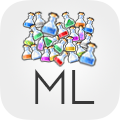
<style>
.page{position:relative;width:120px;height:120px;background:#ededed}
.page>*{position:absolute;margin:0}
.t1{font:51px "NEOTERIC-Bold";color:#383838}
</style>
<div class="page">
<p class="t1" style="left:35px;top:69px;width:60px;height:35px">ML</p>
</div>
